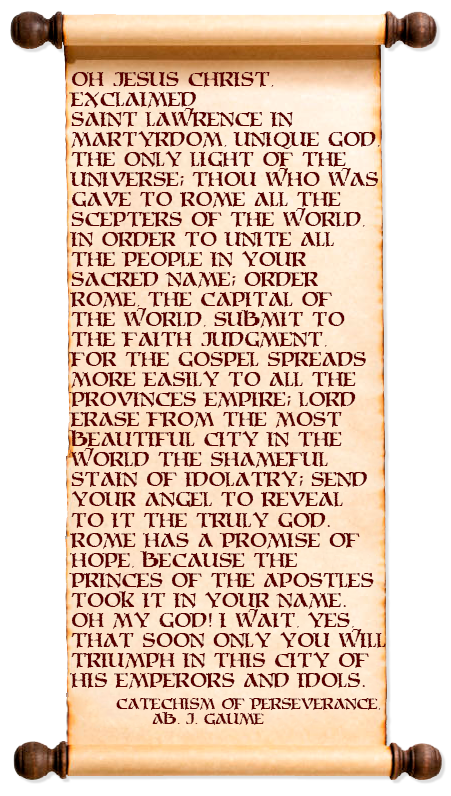
<style>
.page{position:relative;width:451px;height:796px;background:#ffffff}
.page>*{position:absolute;margin:0}
.t1{font:16.7px "MoriaCitadel";color:#580000}
.t2{font:12.5px "MoriaCitadel";color:#580000}
</style>
<div class="page">
<p class="t1" style="left:69px;top:72px;width:317px;height:617px">Oh Jesus Christ,<br>exclaimed<br>Saint Lawrence in<br>martyrdom, unique God,<br>the only light of the<br>universe; Thou who was<br>gave to Rome all the<br>scepters of the world,<br>in order to unite all<br>the people in your<br>Sacred Name; order<br>Rome, the capital of<br>the world, submit to<br>the faith judgment,<br>for the Gospel spreads<br>more easily to all the<br>provinces empire; Lord<br>erase from the most<br>beautiful city in the<br>world the shameful<br>stain of idolatry; send<br>your Angel to reveal<br>to it the truly God.<br>Rome has a promise of<br>hope, because the<br>Princes of the Apostles<br>took it in your name.<br>Oh my God! I wait, yes,<br>that soon only You will<br>triumph in this city of<br>his emperors and idols.</p>
<p class="t2" style="left:116px;top:698px;width:265px;height:27px">Catechism of Perseverance,<br> Ab. J. Gaume</p>
</div>
